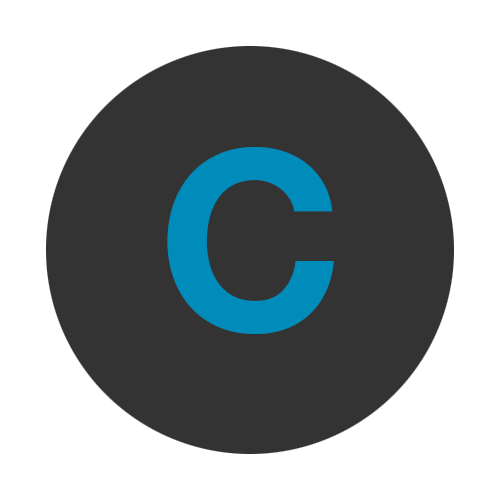
<style>
.page{position:relative;width:500px;height:500px;background:#ffffff}
.page>*{position:absolute;margin:0}
.t1{font:250px "HelveticaNeue-Bold";color:#008cba}
</style>
<div class="page">
<p class="t1" style="left:167px;top:147px;width:167px;height:187px">C</p>
</div>
